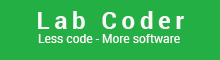
<style>
.page{position:relative;width:220px;height:60px;background:#24af45}
.page>*{position:absolute;margin:0}
.t1{font:24px "Roboto-Bold";letter-spacing:0.2em;color:#f9f9f9}
.t2{font:12px "Roboto-Regular";color:#f9f9f9}
</style>
<div class="page">
<p class="t1" style="left:38px;top:11px;width:146px;height:18px">Lab Coder</p>
<p class="t2" style="left:38px;top:34px;width:142px;height:9px">Less code - More software</p>
</div>
